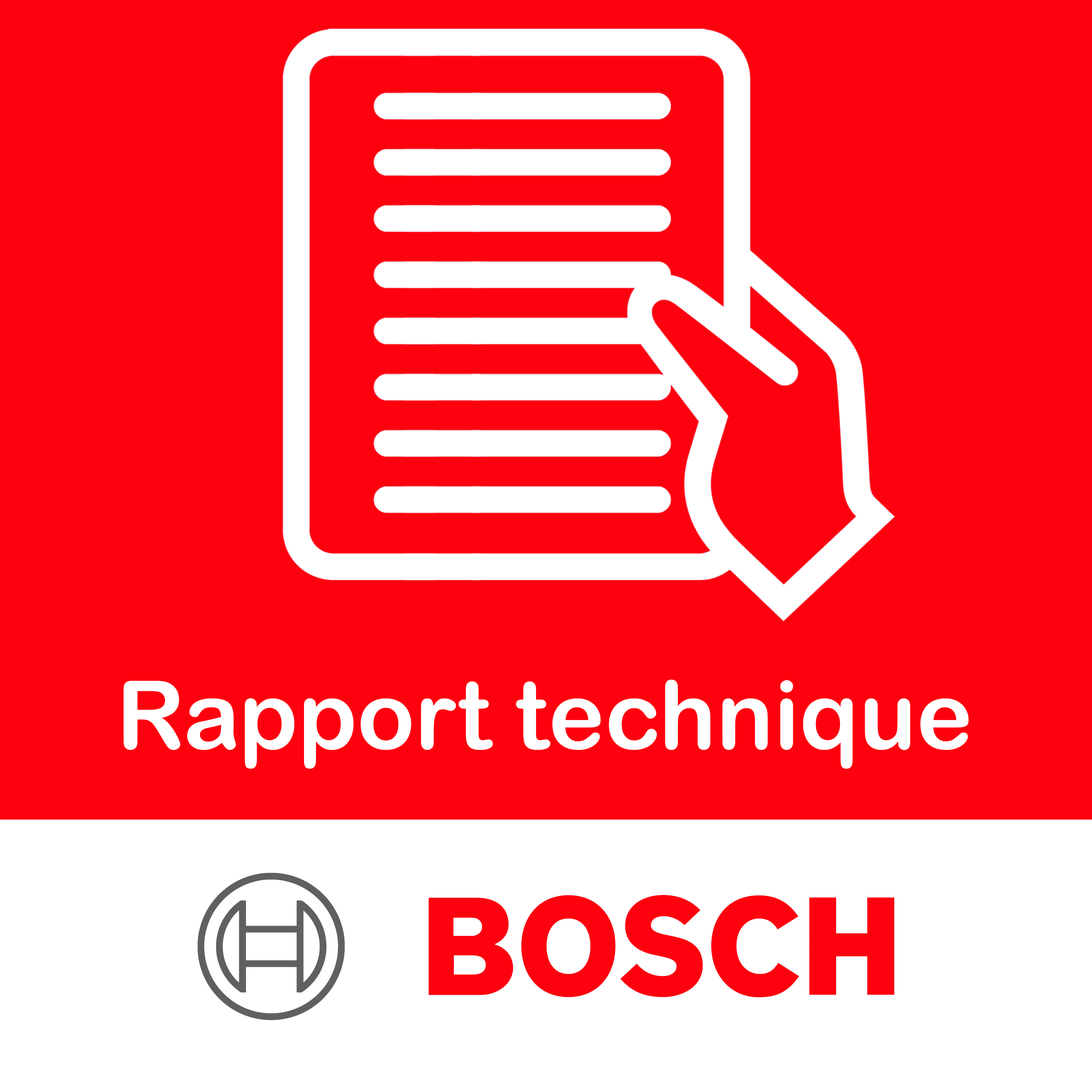
<style>
.page{position:relative;width:1092px;height:1092px;background:#ff000f}
.page>*{position:absolute;margin:0}
.t1{font:95px "ArialRoundedMTBold";color:#ffffff}
</style>
<div class="page">
<p class="t1" style="left:123px;top:680px;width:846px;height:89px">Rapport technique</p>
</div>
